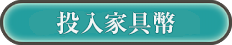
<style>
.page{position:relative;width:232px;height:45px}
.page>*{position:absolute;margin:0}
.t1{font:24px "RyuminPr6N-ExBold";color:#f2f6f6}
</style>
<div class="page">
<p class="t1" style="left:56px;top:11px;width:119px;height:24px">投入家具幣</p>
</div>
